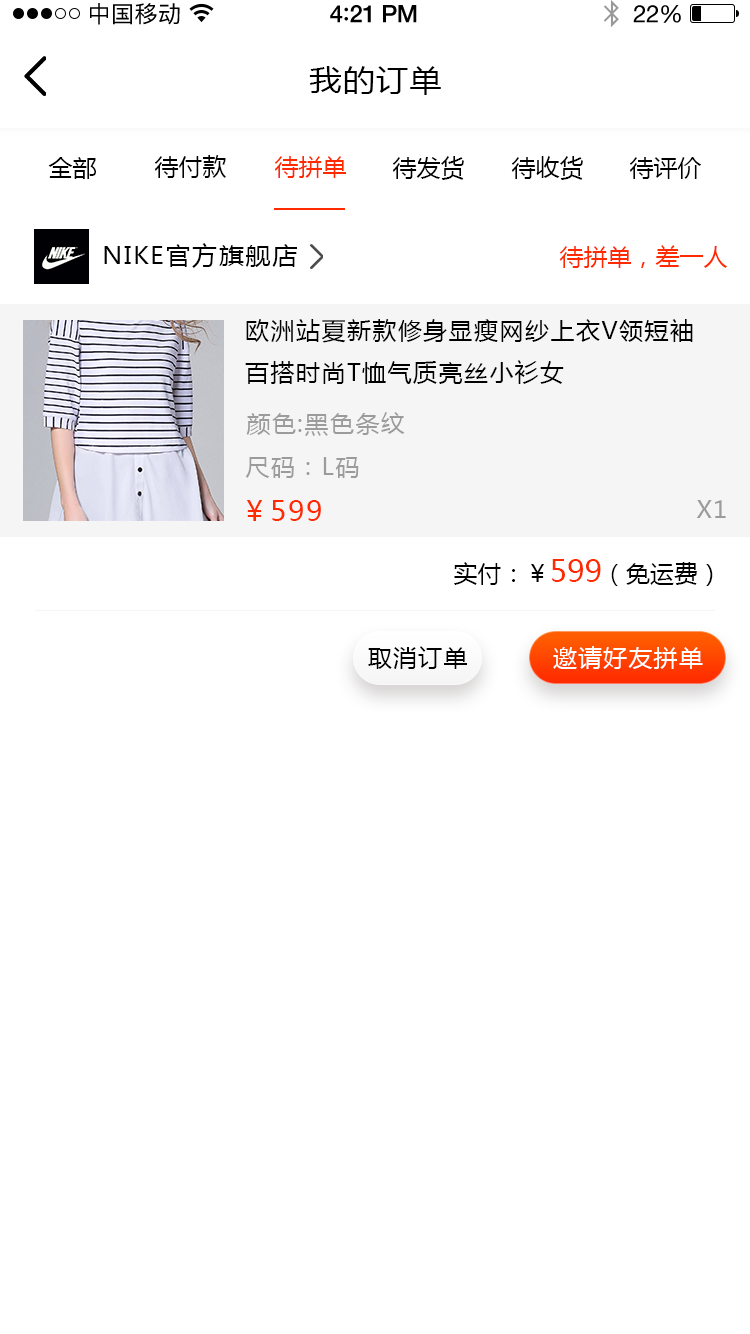
<style>
.page{position:relative;width:750px;height:1334px;background:#ffffff}
.page>*{position:absolute;margin:0}
.t1{font:23px "PingFangSC-Regular";letter-spacing:0.02em;color:#000000}
.t2{font:24px "HelveticaNeue-Medium";letter-spacing:-0.02em;color:#000000}
.t3{font:26px "Avenir-Medium";letter-spacing:-0.02em;color:#000000}
.t4{font:24px "HelveticaNeue";letter-spacing:-0.02em;color:#000000}
.t5{font:30px "MicrosoftYaHei";letter-spacing:0.05em;color:#000000;scale:1.06 1}
.t6{font:24px "MicrosoftYaHei";color:#000000;text-transform:uppercase}
.t7{font:24px "MicrosoftYaHei";color:#ff2a00;text-transform:uppercase}
.t8{font:24px "MicrosoftYaHei";letter-spacing:0.05em;color:#000000;scale:1.06 1}
.t9{font:24px "MicrosoftYaHei";letter-spacing:0.06em;color:#000000;text-transform:uppercase}
.t10{font:24px "MicrosoftYaHei";letter-spacing:0.06em;color:#9b9b9b;text-transform:uppercase}
.t11{font:28px "MicrosoftYaHei";letter-spacing:0.06em;color:#ff2a00;text-transform:uppercase}
.t12{font:30px "MicrosoftYaHei";color:#ff2a00;text-transform:uppercase}
.t13{font:24px "MicrosoftYaHei";letter-spacing:0.05em;color:#000000;text-transform:uppercase}
.t14{font:24px "MicrosoftYaHei";letter-spacing:0.05em;color:#ffffff;text-transform:uppercase}
</style>
<div class="page">
<p class="t1" style="left:90px;top:3px;width:90px;height:22px">中国移动</p>
<p class="t2" style="left:330px;top:5px;width:87px;height:18px">4<span class="t3">:</span>21 PM</p>
<p class="t4" style="left:633px;top:5px;width:48px;height:18px">22%</p>
<p class="t5" style="left:309px;top:66px;width:132px;height:29px">我的订单</p>
<p class="t6" style="left:48px;top:157px;width:48px;height:22px">全部</p>
<p class="t6" style="left:154px;top:155px;width:72px;height:23px">待付款</p>
<p class="t7" style="left:274px;top:156px;width:72px;height:22px">待拼单</p>
<p class="t6" style="left:392px;top:156px;width:72px;height:24px">待发货</p>
<p class="t6" style="left:511px;top:156px;width:72px;height:24px">待收货</p>
<p class="t6" style="left:629px;top:157px;width:73px;height:22px">待评价</p>
<p class="t8" style="left:104px;top:243px;width:193px;height:25px">NIKE官方旗舰店</p>
<p class="t7" style="left:559px;top:245px;width:169px;height:23px">待拼单，差一人</p>
<p class="t9" style="left:245px;top:319px;width:448px;height:65px">欧洲站夏新款修身显瘦网纱上衣v领短袖百搭时尚t恤气质亮丝小衫女</p>
<p class="t10" style="left:246px;top:412px;width:159px;height:24px">颜色:黑色条纹</p>
<p class="t10" style="left:245px;top:457px;width:114px;height:21px">尺码：L码</p>
<p class="t11" style="left:246px;top:500px;width:75px;height:21px">￥599</p>
<p class="t10" style="left:696px;top:500px;width:30px;height:18px">x1</p>
<p class="t6" style="left:454px;top:559px;width:259px;height:27px">实付：￥<span class="t12">599</span>（免运费）</p>
<p class="t13" style="left:368px;top:646px;width:99px;height:23px">取消订单</p>
<p class="t14" style="left:553px;top:646px;width:150px;height:23px">邀请好友拼单</p>
</div>
